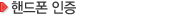
<style>
.page{position:relative;width:180px;height:18px;background:#ffffff}
.page>*{position:absolute;margin:0}
.t1{font:14.7px "YDIYGO330";letter-spacing:-0.03em;color:#373737;scale:0.92 1}
</style>
<div class="page">
<p class="t1" style="left:11px;top:1px;width:65px;height:14px">핸드폰 인증</p>
</div>
